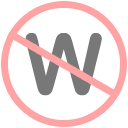
<style>
.page{position:relative;width:128px;height:128px;background:#ffffff}
.page>*{position:absolute;margin:0}
.t1{font:83.9px "ArialRoundedMTBold";color:#787878}
</style>
<div class="page">
<p class="t1" style="left:25px;top:33px;width:77px;height:63px">W</p>
</div>
